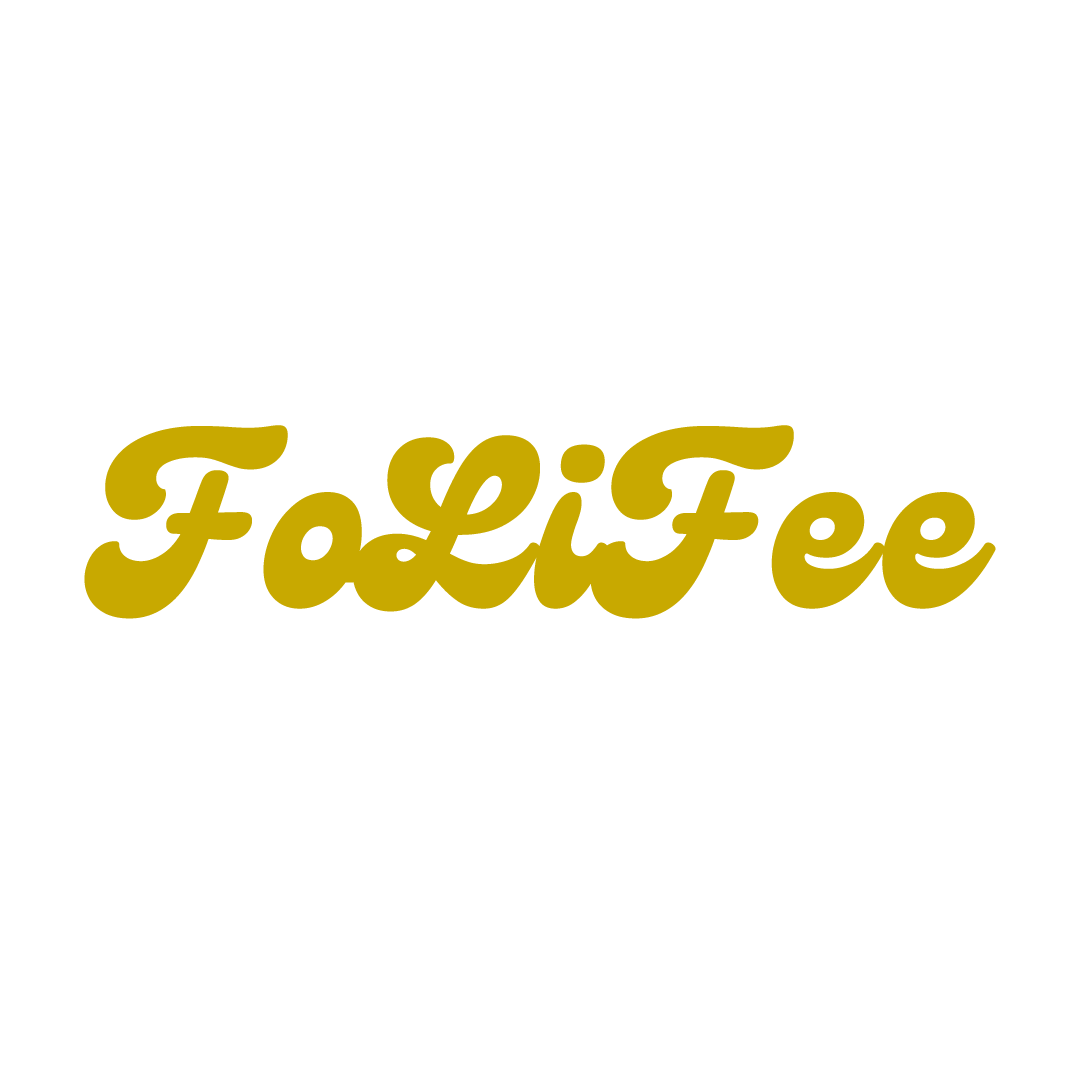
<style>
.page{position:relative;width:1080px;height:1080px;background:#ffffff}
.page>*{position:absolute;margin:0}
.t1{font:232.8px "GentyDemo-Regular";letter-spacing:0.045em;color:#c8a900}
</style>
<div class="page">
<p class="t1" style="left:84px;top:425px;width:912px;height:194px">FoLiFee</p>
</div>
